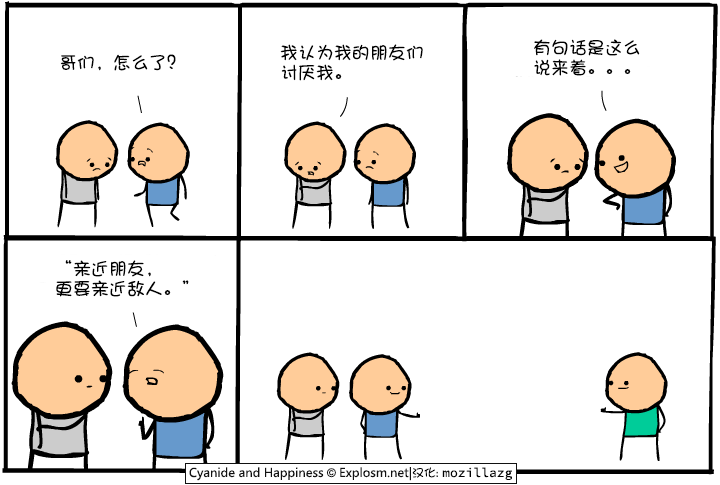
<style>
.page{position:relative;width:720px;height:485px;background:#ffffff}
.page>*{position:absolute;margin:0}
.t1{font:18px/20px "DFPShaoNvW5";color:#000000}
.t2{font:18px "DFPShaoNvW5";color:#000000}
</style>
<div class="page">
<p class="t1" style="left:534px;top:39px;width:106px;height:37px">有句话是这么<br>说来着。。。</p>
<p class="t2" style="left:60px;top:54px;width:116px;height:17px">哥们，怎么了？</p>
<p class="t1" style="left:280px;top:44px;width:143px;height:37px">我认为我的朋友们<br>讨厌我。</p>
<p class="t1" style="left:56px;top:260px;width:133px;height:37px">“亲近朋友，<br>更要亲近敌人。”</p>
</div>
